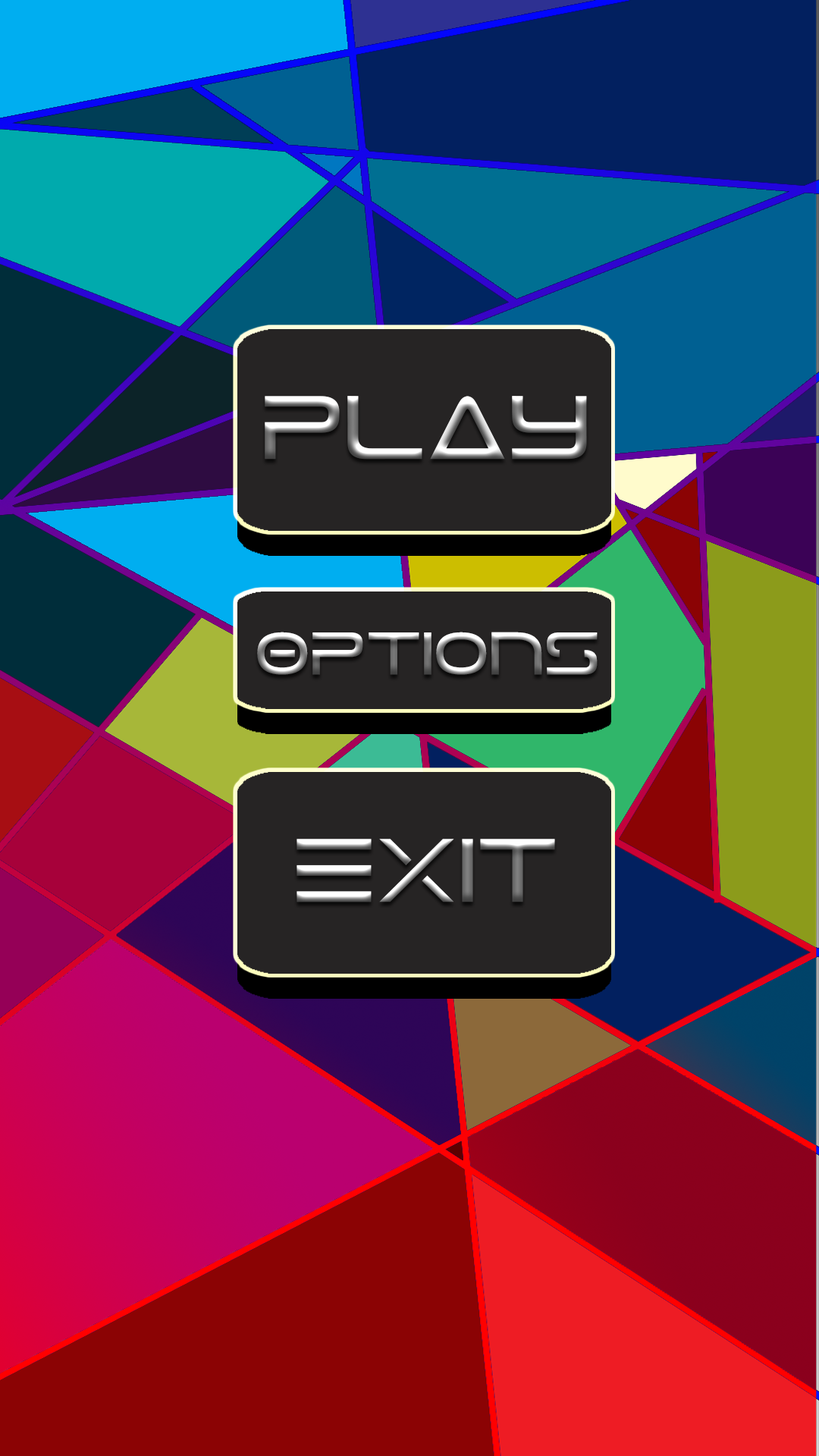
<style>
.page{position:relative;width:819px;height:1456px}
.page>*{position:absolute;margin:0}
.t1{font:81.1px "Tele-Marines"}
.t2{font:54.5px "Tele-Marines"}
</style>
<div class="page">
<p class="t1" style="left:265px;top:396px;width:322px;height:64px">Play</p>
<p class="t2" style="left:257px;top:632px;width:341px;height:43px">Options</p>
<p class="t1" style="left:297px;top:839px;width:258px;height:63px">Exit</p>
</div>
